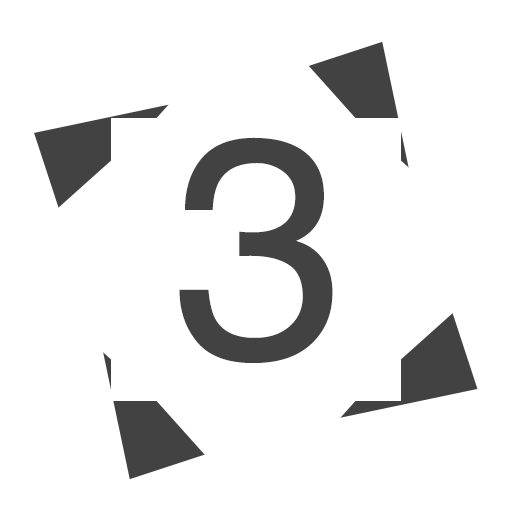
<style>
.page{position:relative;width:512px;height:512px;background:#ffffff}
.page>*{position:absolute;margin:0}
.t1{font:312.5px "Helvetica";letter-spacing:-0.04em;color:#424242}
</style>
<div class="page">
<p class="t1" style="left:179px;top:137px;width:154px;height:226px">3</p>
</div>
